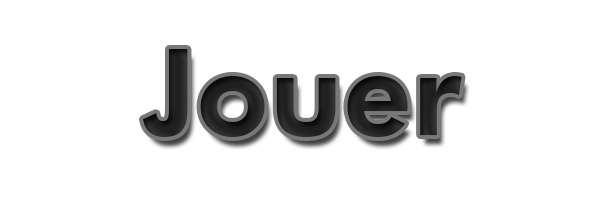
<style>
.page{position:relative;width:600px;height:200px;background:#ffffff}
.page>*{position:absolute;margin:0}
.t1{font:120px "FuturaBT-Heavy";color:#212121}
</style>
<div class="page">
<p class="t1" style="left:143px;top:49px;width:319px;height:88px">Jouer</p>
</div>
